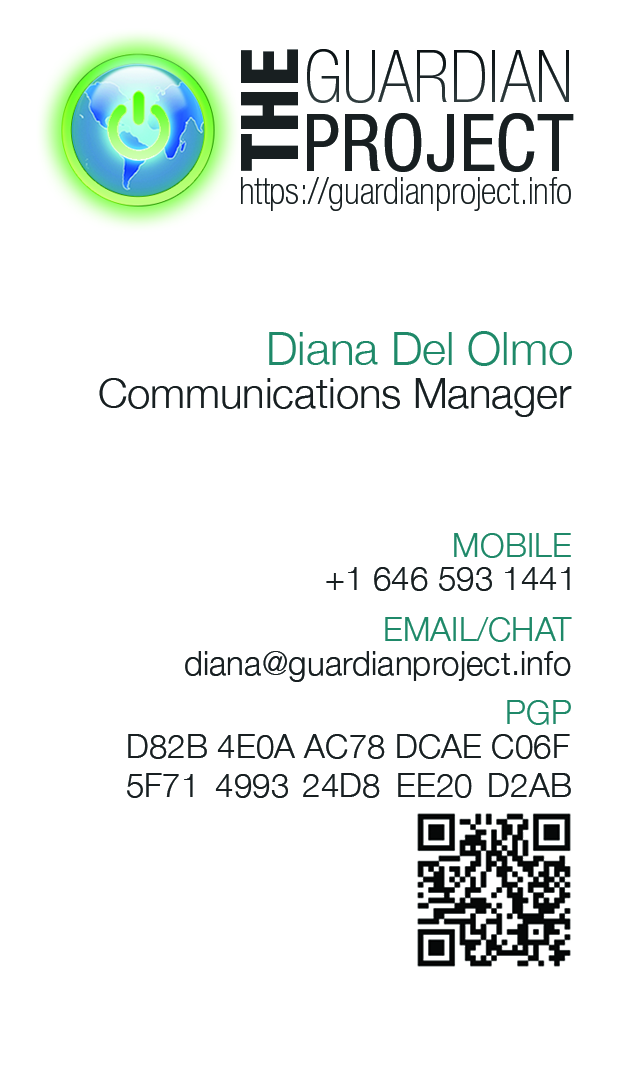
<style>
.page{position:relative;width:638px;height:1088px;background:#ffffff}
.page>*{position:absolute;margin:0}
.t1{font:79.2px "HelveticaNeueLTStd-HvCn";color:#181f21}
.t2{font:72.9px "HelveticaNeueLTStd-ThCn";color:#181f21}
.t3{font:79.2px "HelveticaNeueLTStd-Cn";color:#181f21}
.t4{font:37.5px "HelveticaNeueLTStd-ThCn";color:#181f21}
.t5{font:45.8px "HelveticaNeue-Light";color:#1f8969}
.t6{font:41.7px "HelveticaNeue-Light";color:#181f21}
.t7{font:33.3px/83.3px "HelveticaNeue-Light";color:#1f8969}
.t8{font:33.3px "HelveticaNeue-Light";color:#181f21}
</style>
<div class="page">
<p class="t1" style="left:241px;top:49px;width:57px;height:122px;rotate:-90deg">THE</p>
<p class="t2" style="left:307px;top:49px;width:262px;height:54px">GUARDIAN</p>
<p class="t3" style="left:307px;top:113px;width:267px;height:59px">PROJECT</p>
<p class="t4" style="left:241px;top:177px;width:330px;height:34px">https://guardianproject.info</p>
<p class="t5" style="left:269px;top:331px;width:303px;height:35px">Diana Del Olmo</p>
<p class="t6" style="left:99px;top:378px;width:473px;height:39px">Communications Manager</p>
<p class="t7" style="left:385px;top:533px;width:187px;height:192px;text-align:right">MOBILE<br>EMAIL/CHAT<br>PGP</p>
<p class="t8" style="left:326px;top:567px;width:244px;height:24px">+1 646 593 1441</p>
<p class="t8" style="left:185px;top:651px;width:386px;height:31px">diana@guardianproject.info</p>
<p class="t8" style="left:127px;top:734px;width:444px;height:64px">D82B 4E0A AC78 DCAE C06F<br>5F71 4993 24D8 EE20 D2AB</p>
</div>
